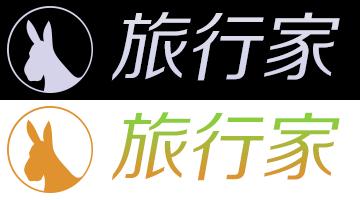
<style>
.page{position:relative;width:360px;height:200px;background:#ffffff}
.page>*{position:absolute;margin:0}
.t1{font:75px "FZZHJW--GB1-0";color:#e2e3ee;font-style:italic}
.t2{font:75px "FZZHJW--GB1-0";font-style:italic}
</style>
<div class="page">
<p class="t1" style="left:111px;top:12px;width:229px;height:69px">旅行家</p>
<p class="t2" style="left:111px;top:112px;width:229px;height:69px">旅行家</p>
</div>
